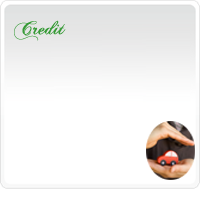
<style>
.page{position:relative;width:200px;height:200px;background:#ffffff}
.page>*{position:absolute;margin:0}
.t1{font:20.8px "ChopinScript";color:#369a36}
</style>
<div class="page">
<p class="t1" style="left:14px;top:20px;width:52px;height:21px">Credit</p>
</div>
